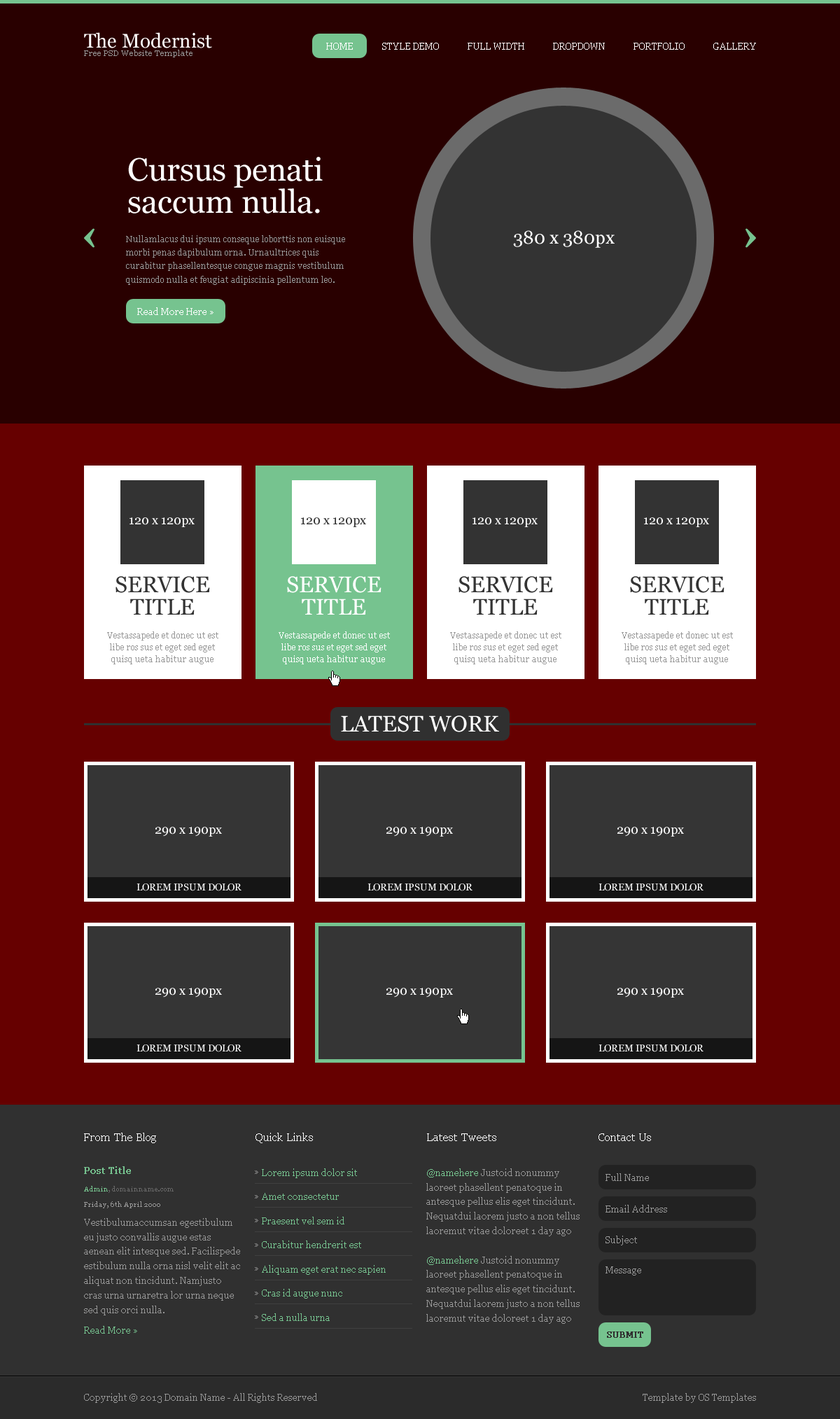
<style>
.page{position:relative;width:840px;height:1419px;background:#290000}
.page>*{position:absolute;margin:0}
.t1{font:19.6px "Georgia";color:#ffffff}
.t2{font:7.7px "Georgia";color:#979797}
.t3{font:9.1px "Georgia";color:#ffffff}
.t4{font:32.2px/32.2px "Georgia";color:#ffffff}
.t5{font:18.2px "Georgia";color:#ffffff}
.t6{font:8.4px/13.4px "Georgia";color:#979797}
.t7{font:12.6px "Georgia";color:#ffffff}
.t8{font:12.6px "Georgia";color:#333333}
.t9{font:22.4px/22.4px "Georgia";color:#333333}
.t10{font:22.4px/22.4px "Georgia";color:#ffffff}
.t11{font:8.4px/11.8px "Georgia";color:#979797}
.t12{font:8.4px/11.8px "Georgia";color:#ffffff}
.t13{font:22.4px "Georgia";color:#ffffff}
.t14{font:9.8px "Georgia";color:#ffffff}
.t15{font:11.2px "Georgia";color:#ffffff}
.t16{font:9.1px "Georgia";color:#76c38f;font-weight:bold}
.t17{font:9.1px/24.1px "Georgia";color:#76c38f}
.t18{font:9.1px/14.6px "Georgia";color:#979797}
.t19{font:9.1px/14.6px "Georgia";color:#76c38e}
.t20{font:9.1px "Georgia";color:#989898}
.t21{font:7px "Georgia";color:#666666}
.t22{font:7px "Georgia";color:#76c38e}
.t23{font:7px "Georgia";color:#979797}
.t24{font:9.1px "Georgia";color:#76c38f}
.t25{font:8.4px "Georgia";color:#303030;font-weight:bold}
.t26{font:9.1px "Georgia";color:#979797}
</style>
<div class="page">
<p class="t1" style="left:84px;top:32px;width:128px;height:16px">The Modernist</p>
<p class="t2" style="left:84px;top:50px;width:109px;height:7px">Free PSD Website Template</p>
<p class="t3" style="left:326px;top:43px;width:27px;height:7px">HOME</p>
<p class="t3" style="left:382px;top:43px;width:57px;height:7px">STYLE DEMO</p>
<p class="t3" style="left:468px;top:43px;width:56px;height:7px">FULL WIDTH</p>
<p class="t3" style="left:553px;top:43px;width:52px;height:7px">DROPDOWN</p>
<p class="t3" style="left:634px;top:43px;width:51px;height:7px">PORTFOLIO</p>
<p class="t3" style="left:713px;top:43px;width:43px;height:7px">GALLERY</p>
<p class="t4" style="left:128px;top:157px;width:195px;height:57px">Cursus penati <br>saccum nulla.</p>
<p class="t5" style="left:513px;top:230px;width:102px;height:18px">380 x 380px</p>
<p class="t6" style="left:126px;top:235px;width:219px;height:50px">Nullamlacus dui ipsum conseque loborttis non euisque morbi penas dapibulum orna. Urnaultrices quis curabitur phasellentesque congue magnis vestibulum quismodo nulla et feugiat adipiscinia pellentum leo.</p>
<p class="t3" style="left:137px;top:307px;width:77px;height:8px">Read More Here »</p>
<p class="t7" style="left:130px;top:517px;width:65px;height:10px">120 x 120px</p>
<p class="t8" style="left:301px;top:517px;width:65px;height:10px">120 x 120px</p>
<p class="t7" style="left:473px;top:517px;width:65px;height:10px">120 x 120px</p>
<p class="t7" style="left:644px;top:517px;width:65px;height:10px">120 x 120px</p>
<p class="t9" style="left:116px;top:576px;width:94px;height:39px;text-align:center">SERVICE<br>TITLE</p>
<p class="t10" style="left:287px;top:576px;width:95px;height:39px;text-align:center">SERVICE<br>TITLE</p>
<p class="t9" style="left:459px;top:576px;width:94px;height:39px;text-align:center">SERVICE<br>TITLE</p>
<p class="t9" style="left:630px;top:576px;width:95px;height:39px;text-align:center">SERVICE<br>TITLE</p>
<p class="t11" style="left:107px;top:632px;width:111px;height:32px;text-align:center">Vestassapede et donec ut est libe ros sus et eget sed eget quisq ueta habitur augue</p>
<p class="t12" style="left:279px;top:632px;width:111px;height:32px;text-align:center">Vestassapede et donec ut est libe ros sus et eget sed eget quisq ueta habitur augue</p>
<p class="t11" style="left:450px;top:632px;width:112px;height:32px;text-align:center">Vestassapede et donec ut est libe ros sus et eget sed eget quisq ueta habitur augue</p>
<p class="t11" style="left:622px;top:632px;width:111px;height:32px;text-align:center">Vestassapede et donec ut est libe ros sus et eget sed eget quisq ueta habitur augue</p>
<p class="t13" style="left:341px;top:716px;width:158px;height:16px">LATEST WORK</p>
<p class="t7" style="left:155px;top:827px;width:67px;height:10px">290 x 190px</p>
<p class="t7" style="left:386px;top:827px;width:67px;height:10px">290 x 190px</p>
<p class="t7" style="left:618px;top:827px;width:66px;height:10px">290 x 190px</p>
<p class="t14" style="left:137px;top:884px;width:105px;height:7px">LOREM IPSUM DOLOR</p>
<p class="t14" style="left:368px;top:884px;width:105px;height:7px">LOREM IPSUM DOLOR</p>
<p class="t14" style="left:599px;top:884px;width:105px;height:7px">LOREM IPSUM DOLOR</p>
<p class="t7" style="left:155px;top:988px;width:67px;height:10px">290 x 190px</p>
<p class="t7" style="left:386px;top:988px;width:67px;height:10px">290 x 190px</p>
<p class="t7" style="left:618px;top:988px;width:66px;height:10px">290 x 190px</p>
<p class="t14" style="left:137px;top:1045px;width:105px;height:7px">LOREM IPSUM DOLOR</p>
<p class="t14" style="left:599px;top:1045px;width:105px;height:7px">LOREM IPSUM DOLOR</p>
<p class="t15" style="left:84px;top:1133px;width:72px;height:10px">From The Blog</p>
<p class="t15" style="left:256px;top:1133px;width:57px;height:10px">Quick Links</p>
<p class="t15" style="left:427px;top:1134px;width:69px;height:7px">Latest Tweets</p>
<p class="t15" style="left:599px;top:1134px;width:52px;height:7px">Contact Us</p>
<p class="t16" style="left:84px;top:1166px;width:47px;height:8px">Post Title</p>
<p class="t17" style="left:262px;top:1169px;width:124px;height:152px">Lorem ipsum dolor sit<br>Amet consectetur<br>Praesent vel sem id<br>Curabitur hendrerit est<br>Aliquam eget erat nec sapien<br>Cras id augue nunc<br>Sed a nulla urna</p>
<p class="t18" style="left:426px;top:1169px;width:154px;height:155px"><span class="t19">@namehere</span> Justoid nonummy laoreet phasellent penatoque in antesque pellus elis eget tincidunt. Nequatdui laorem justo a non tellus laoremut vitae doloreet 1 day ago<br><br><span class="t19">@namehere</span> Justoid nonummy laoreet phasellent penatoque in antesque pellus elis eget tincidunt. Nequatdui laorem justo a non tellus laoremut vitae doloreet 1 day ago</p>
<p class="t20" style="left:606px;top:1173px;width:43px;height:8px">Full Name</p>
<p class="t21" style="left:84px;top:1186px;width:90px;height:7px"><span class="t22">Admin</span>, domainname.com</p>
<p class="t23" style="left:84px;top:1201px;width:76px;height:7px">Friday, 6th April 2000</p>
<p class="t20" style="left:606px;top:1205px;width:61px;height:8px">Email Address</p>
<p class="t18" style="left:84px;top:1218px;width:156px;height:98px">Vestibulumaccumsan egestibulum eu justo convallis augue estas aenean elit intesque sed. Facilispede estibulum nulla orna nisl velit elit ac aliquat non tincidunt. Namjusto cras urna urnaretra lor urna neque sed quis orci nulla.</p>
<p class="t20" style="left:606px;top:1236px;width:31px;height:10px">Subject</p>
<p class="t20" style="left:606px;top:1267px;width:35px;height:9px">Message</p>
<p class="t24" style="left:84px;top:1326px;width:53px;height:8px">Read More »</p>
<p class="t25" style="left:607px;top:1332px;width:36px;height:6px">SUBMIT</p>
<p class="t26" style="left:84px;top:1393px;width:233px;height:10px">Copyright © 2013 Domain Name - All Rights Reserved</p>
<p class="t26" style="left:643px;top:1393px;width:113px;height:10px">Template by OS Templates</p>
</div>
